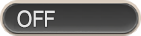
<style>
.page{position:relative;width:141px;height:36px}
.page>*{position:absolute;margin:0}
.t1{font:22px "FutoGoB101Pr5-Bold";letter-spacing:-0.04em;color:#e6e6e6;scale:0.9 1}
</style>
<div class="page">
<p class="t1" style="left:17px;top:10px;width:38px;height:18px">OFF</p>
</div>
